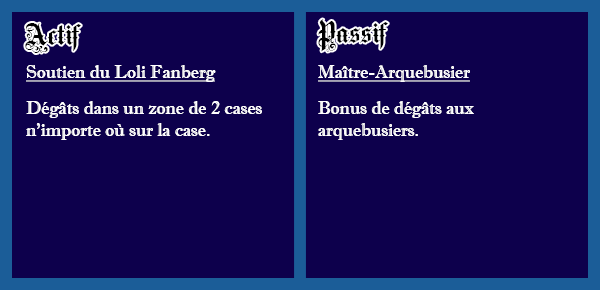
<style>
.page{position:relative;width:600px;height:290px;background:#0d004c}
.page>*{position:absolute;margin:0}
.t1{font:30px "MediciText";color:#000000}
.t2{font:18px "ImprintMT-Shadow";color:#ffffff;text-decoration:underline}
.t3{font:18px "ImprintMT-Shadow";color:#ffffff}
</style>
<div class="page">
<p class="t1" style="left:25px;top:23px;width:56px;height:30px">Actif</p>
<p class="t1" style="left:318px;top:19px;width:70px;height:33px">Passif</p>
<p class="t2" style="left:26px;top:65px;width:190px;height:17px">Soutien du Loli Fanberg</p>
<p class="t2" style="left:318px;top:65px;width:152px;height:17px">Maître-Arquebusier</p>
<p class="t3" style="left:26px;top:101px;width:236px;height:39px">Dégâts dans un zone de 2 cases<br>n’importe où sur la case.</p>
<p class="t3" style="left:318px;top:101px;width:156px;height:39px">Bonus de dégâts aux<br>arquebusiers.</p>
</div>
